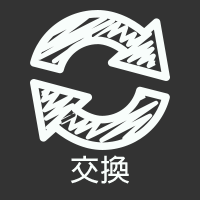
<style>
.page{position:relative;width:200px;height:200px;background:#333333}
.page>*{position:absolute;margin:0}
.t1{font:30px "AdobeFanHeitiStd-Bold";color:#f8fdfb}
</style>
<div class="page">
<p class="t1" style="left:70px;top:155px;width:59px;height:29px">交換</p>
</div>
